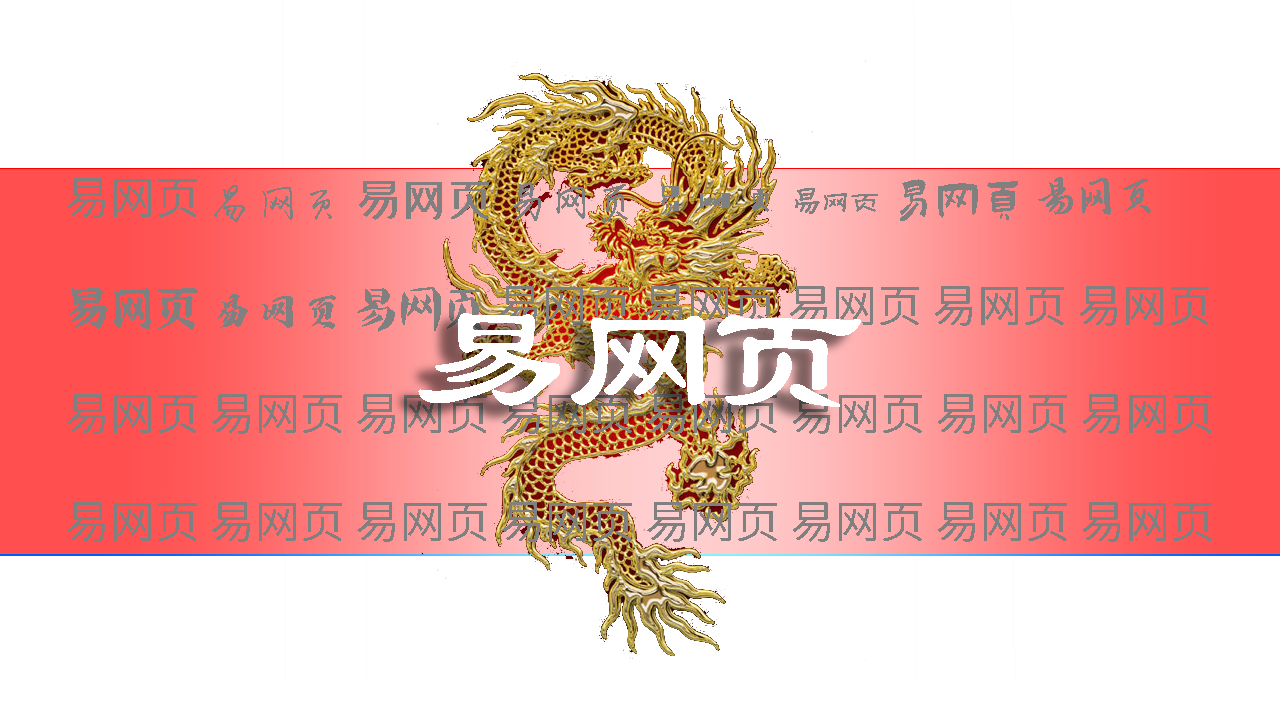
<style>
.page{position:relative;width:1280px;height:720px;background:#ffffff}
.page>*{position:absolute;margin:0}
.t1{font:45px "SourceHanSansSC-Normal";color:#808080}
.t2{font:45px "Pinru";color:#808080}
.t3{font:45px "ZhuoJianGanLanJianTi-Regular";color:#808080}
.t4{font:45px "ShouShuti";color:#808080}
.t5{font:45px "Pangmenzhengdaoqingsongti";color:#808080}
.t6{font:45px "HCSZT-Regular";color:#808080}
.t7{font:45px "Slidefu-Regular";color:#808080}
.t8{font:45px "ZhiMangXing-Regular";color:#808080}
.t9{font:45px "jiangxizhuokai-Regular";color:#808080}
.t10{font:45px "Zcool-MiaoDianFengYun";color:#808080}
.t11{font:45px "yegenyou_tangkai";color:#808080}
.t12{font:45px "NGlongyingbei";color:#808080}
.t13{font:45px "NGliuzhiwenxinkai";color:#808080}
.t14{font:45px "YeGenYouMaoBiXinShu2.1";color:#808080}
.t15{font:150px "Reeji-CloudLiShu-GB-Regular";color:#ffffff}
</style>
<div class="page">
<p class="t1" style="left:66px;top:177px;width:1147px;height:365px">易网页 <span class="t2">易网页 </span><span class="t3">易网页 </span><span class="t4">易网页 </span><span class="t5">易网页 </span><span class="t6">易网页 </span><span class="t7">易网页 </span><span class="t8">易网页<br><br></span><span class="t9">易网页 </span><span class="t10">易网页 </span><span class="t11">易网页 </span><span class="t12">易网页 </span><span class="t13">易网页 </span><span class="t14">易网页 </span>易网页 易网页<br> <br>易网页 易网页 易网页 易网页 易网页 易网页 易网页 易网页 <br><br>易网页 易网页 易网页 易网页 易网页 易网页 易网页 易网页</p>
<p class="t15" style="left:418px;top:312px;width:443px;height:96px">易网页</p>
</div>
